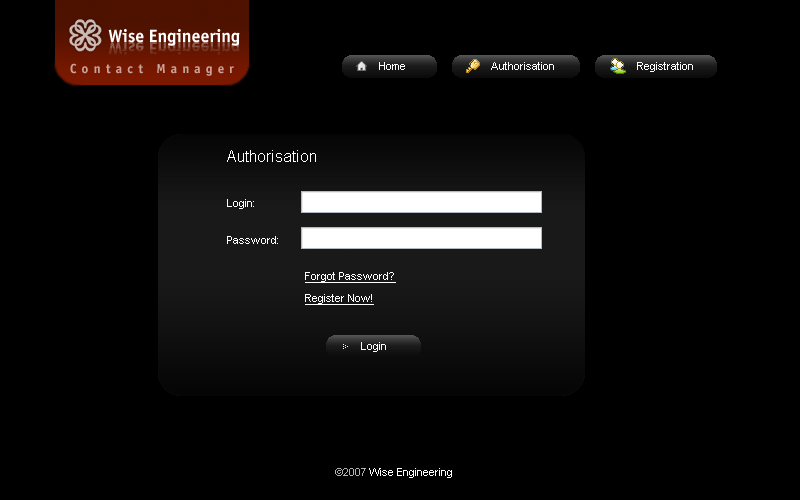
<style>
.page{position:relative;width:800px;height:500px;background:#000000}
.page>*{position:absolute;margin:0}
.t1{font:18px "OfficinaSansBold";color:#ffffff}
.t2{font:13px "OfficinaSansBold";letter-spacing:0.4em;color:#c8a399}
.t3{font:11px "ArialMT";color:#ffffff}
.t4{font:16px "ArialMT";color:#ffffff}
.t5{font:11px "ArialMT";color:#ffffff;text-decoration:underline}
.t6{font:11px "ArialMT";color:#b3b3b3}
</style>
<div class="page">
<p class="t1" style="left:108px;top:29px;width:132px;height:17px">Wise Engineering</p>
<p class="t2" style="left:70px;top:63px;width:164px;height:13px">Contact Manager</p>
<p class="t3" style="left:379px;top:62px;width:26px;height:8px">Home</p>
<p class="t3" style="left:491px;top:62px;width:63px;height:8px">Authorisation</p>
<p class="t3" style="left:637px;top:62px;width:56px;height:10px">Registration</p>
<p class="t4" style="left:227px;top:150px;width:89px;height:12px">Authorisation</p>
<p class="t3" style="left:227px;top:199px;width:27px;height:10px">Login:</p>
<p class="t3" style="left:227px;top:236px;width:51px;height:8px">Password:</p>
<p class="t5" style="left:305px;top:272px;width:91px;height:11px">Forgot Password?</p>
<p class="t5" style="left:305px;top:294px;width:69px;height:11px">Register Now!</p>
<p class="t3" style="left:361px;top:342px;width:25px;height:10px">Login</p>
<p class="t3" style="left:335px;top:468px;width:117px;height:10px"><span class="t6">©2007</span> Wise Engineering</p>
</div>
